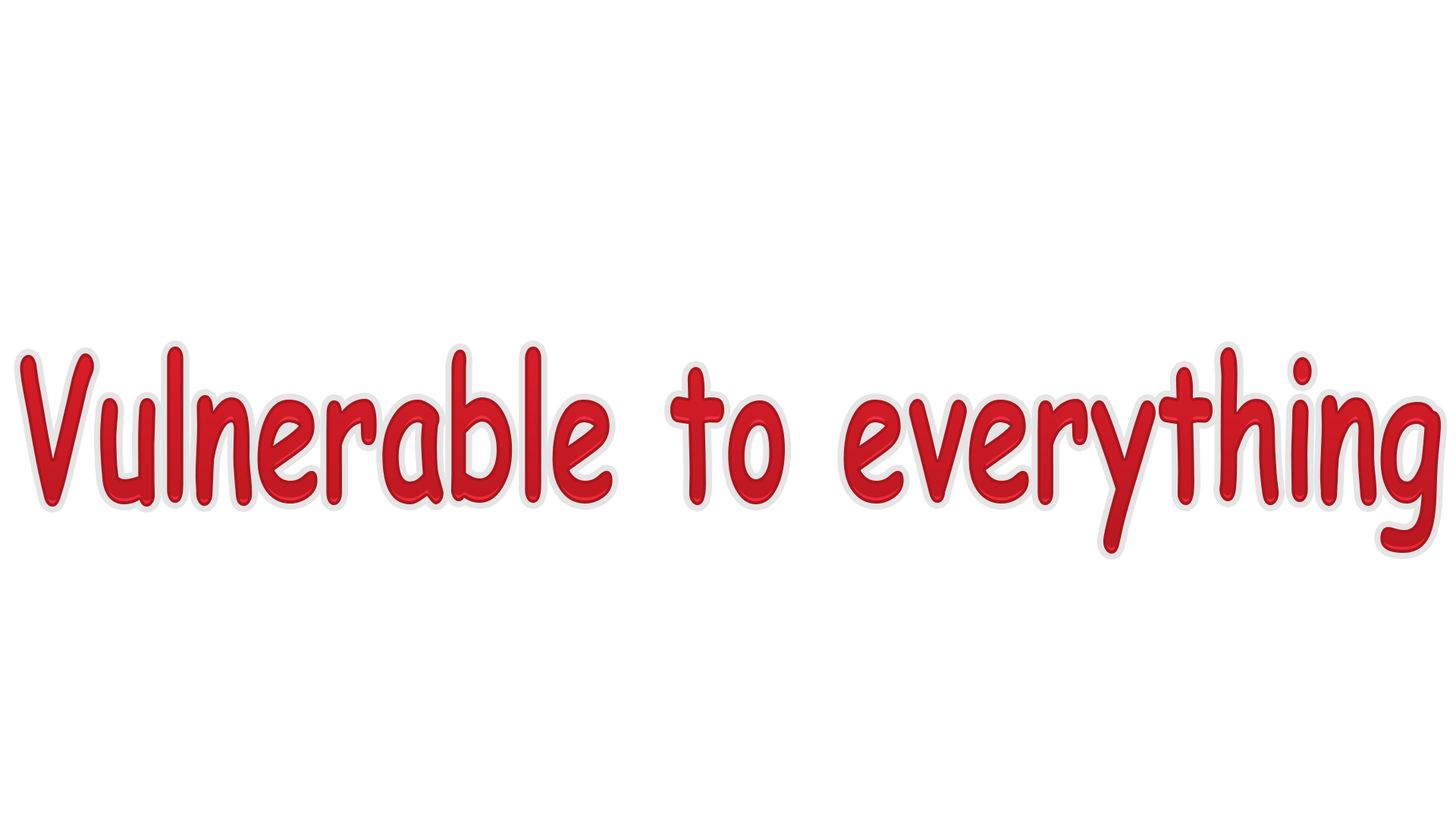
<style>
.page{position:relative;width:1456px;height:819px;background:#ffffff}
.page>*{position:absolute;margin:0}
.t1{font:193.8px "ComicSansMS-Bold";scale:0.62 1}
</style>
<div class="page">
<p class="t1" style="left:20px;top:347px;width:1421px;height:207px">Vulnerable to everything</p>
</div>
